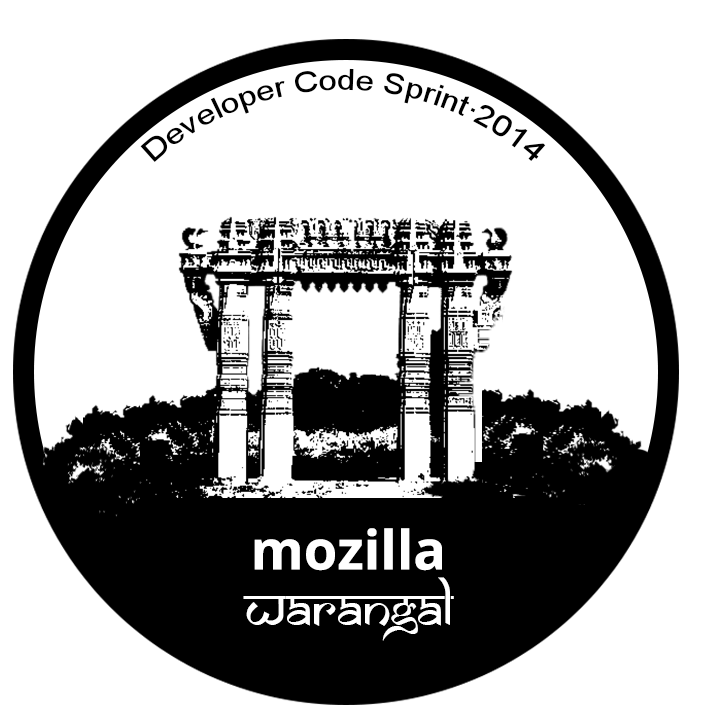
<style>
.page{position:relative;width:703px;height:726px;background:#ffffff}
.page>*{position:absolute;margin:0}
.t1{font:29.1px "ArialMT";color:#000000}
.t2{font:29.1px/125px "ArialMT";color:#000000}
.t3{font:54.2px "OpenSans-Bold";color:#ffffff}
.t4{font:54.2px "SamarkanNormal";color:#ffffff}
</style>
<div class="page">
<p class="t1" style="left:140px;top:68px;width:406px;height:94px;text-align:center">Developer Code Sprint<span class="t2">.</span>2014</p>
<p class="t3" style="left:254px;top:528px;width:188px;height:43px">mozilla</p>
<p class="t4" style="left:243px;top:577px;width:211px;height:64px">warangal</p>
</div>
